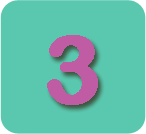
<style>
.page{position:relative;width:146px;height:134px;background:#5ac8af}
.page>*{position:absolute;margin:0}
.t1{font:94.7px "ArialRoundedMTBold";letter-spacing:-0.01em;color:#c05ca3;font-weight:bold}
</style>
<div class="page">
<p class="t1" style="left:47px;top:35px;width:51px;height:70px">3</p>
</div>
